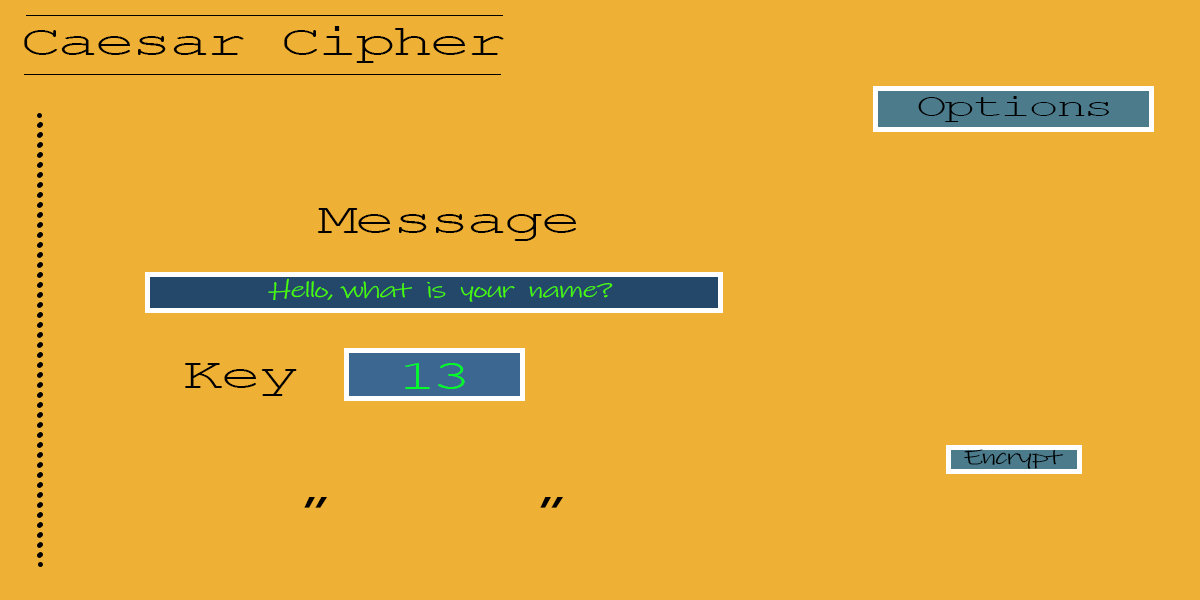
<style>
.page{position:relative;width:1200px;height:600px;background:#efb036}
.page>*{position:absolute;margin:0}
.t1{font:44.4px "CourierNewPSMT";letter-spacing:-0.06em;color:#000000;scale:1.55 1}
.t2{font:33.3px "CourierNewPSMT";letter-spacing:-0.06em;color:#000000;scale:1.55 1}
.t3{font:22.2px "InkFree";letter-spacing:-0.06em;color:#48ff00;scale:1.55 1}
.t4{font:41.6px "CourierNewPSMT";letter-spacing:-0.06em;color:#00ff25;scale:1.55 1}
.t5{font:22.2px "InkFree";letter-spacing:-0.06em;color:#000000;scale:1.55 1}
.t6{font:44.4px "Corbel";letter-spacing:-0.06em;color:#000000;scale:1.55 1}
</style>
<div class="page">
<p class="t1" style="left:24px;top:26px;width:480px;height:37px">Caesar Cipher</p>
<p class="t2" style="left:918px;top:96px;width:191px;height:26px">Options</p>
<p class="t1" style="left:317px;top:208px;width:259px;height:33px">Message</p>
<p class="t3" style="left:268px;top:278px;width:345px;height:24px">Hello, what  is  your  name?</p>
<p class="t1" style="left:185px;top:363px;width:112px;height:33px">Key</p>
<p class="t4" style="left:405px;top:363px;width:60px;height:26px">13</p>
<p class="t5" style="left:964px;top:449px;width:99px;height:20px">Encrypt</p>
<p class="t6" style="left:304px;top:497px;width:259px;height:11px">”                      ”</p>
</div>
